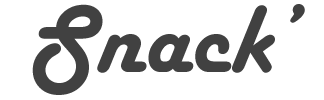
<style>
.page{position:relative;width:324px;height:100px;background:#ffffff}
.page>*{position:absolute;margin:0}
.t1{font:100px "HarlowSolid";color:#414141}
</style>
<div class="page">
<p class="t1" style="left:32px;top:4px;width:273px;height:91px">Snack’</p>
</div>
